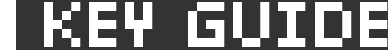
<style>
.page{position:relative;width:388px;height:50px;background:#333333}
.page>*{position:absolute;margin:0}
.t1{font:54.2px "SNchibi_6";color:#ffffff;text-transform:uppercase}
</style>
<div class="page">
<p class="t1" style="left:44px;top:2px;width:344px;height:45px">key guide</p>
</div>
